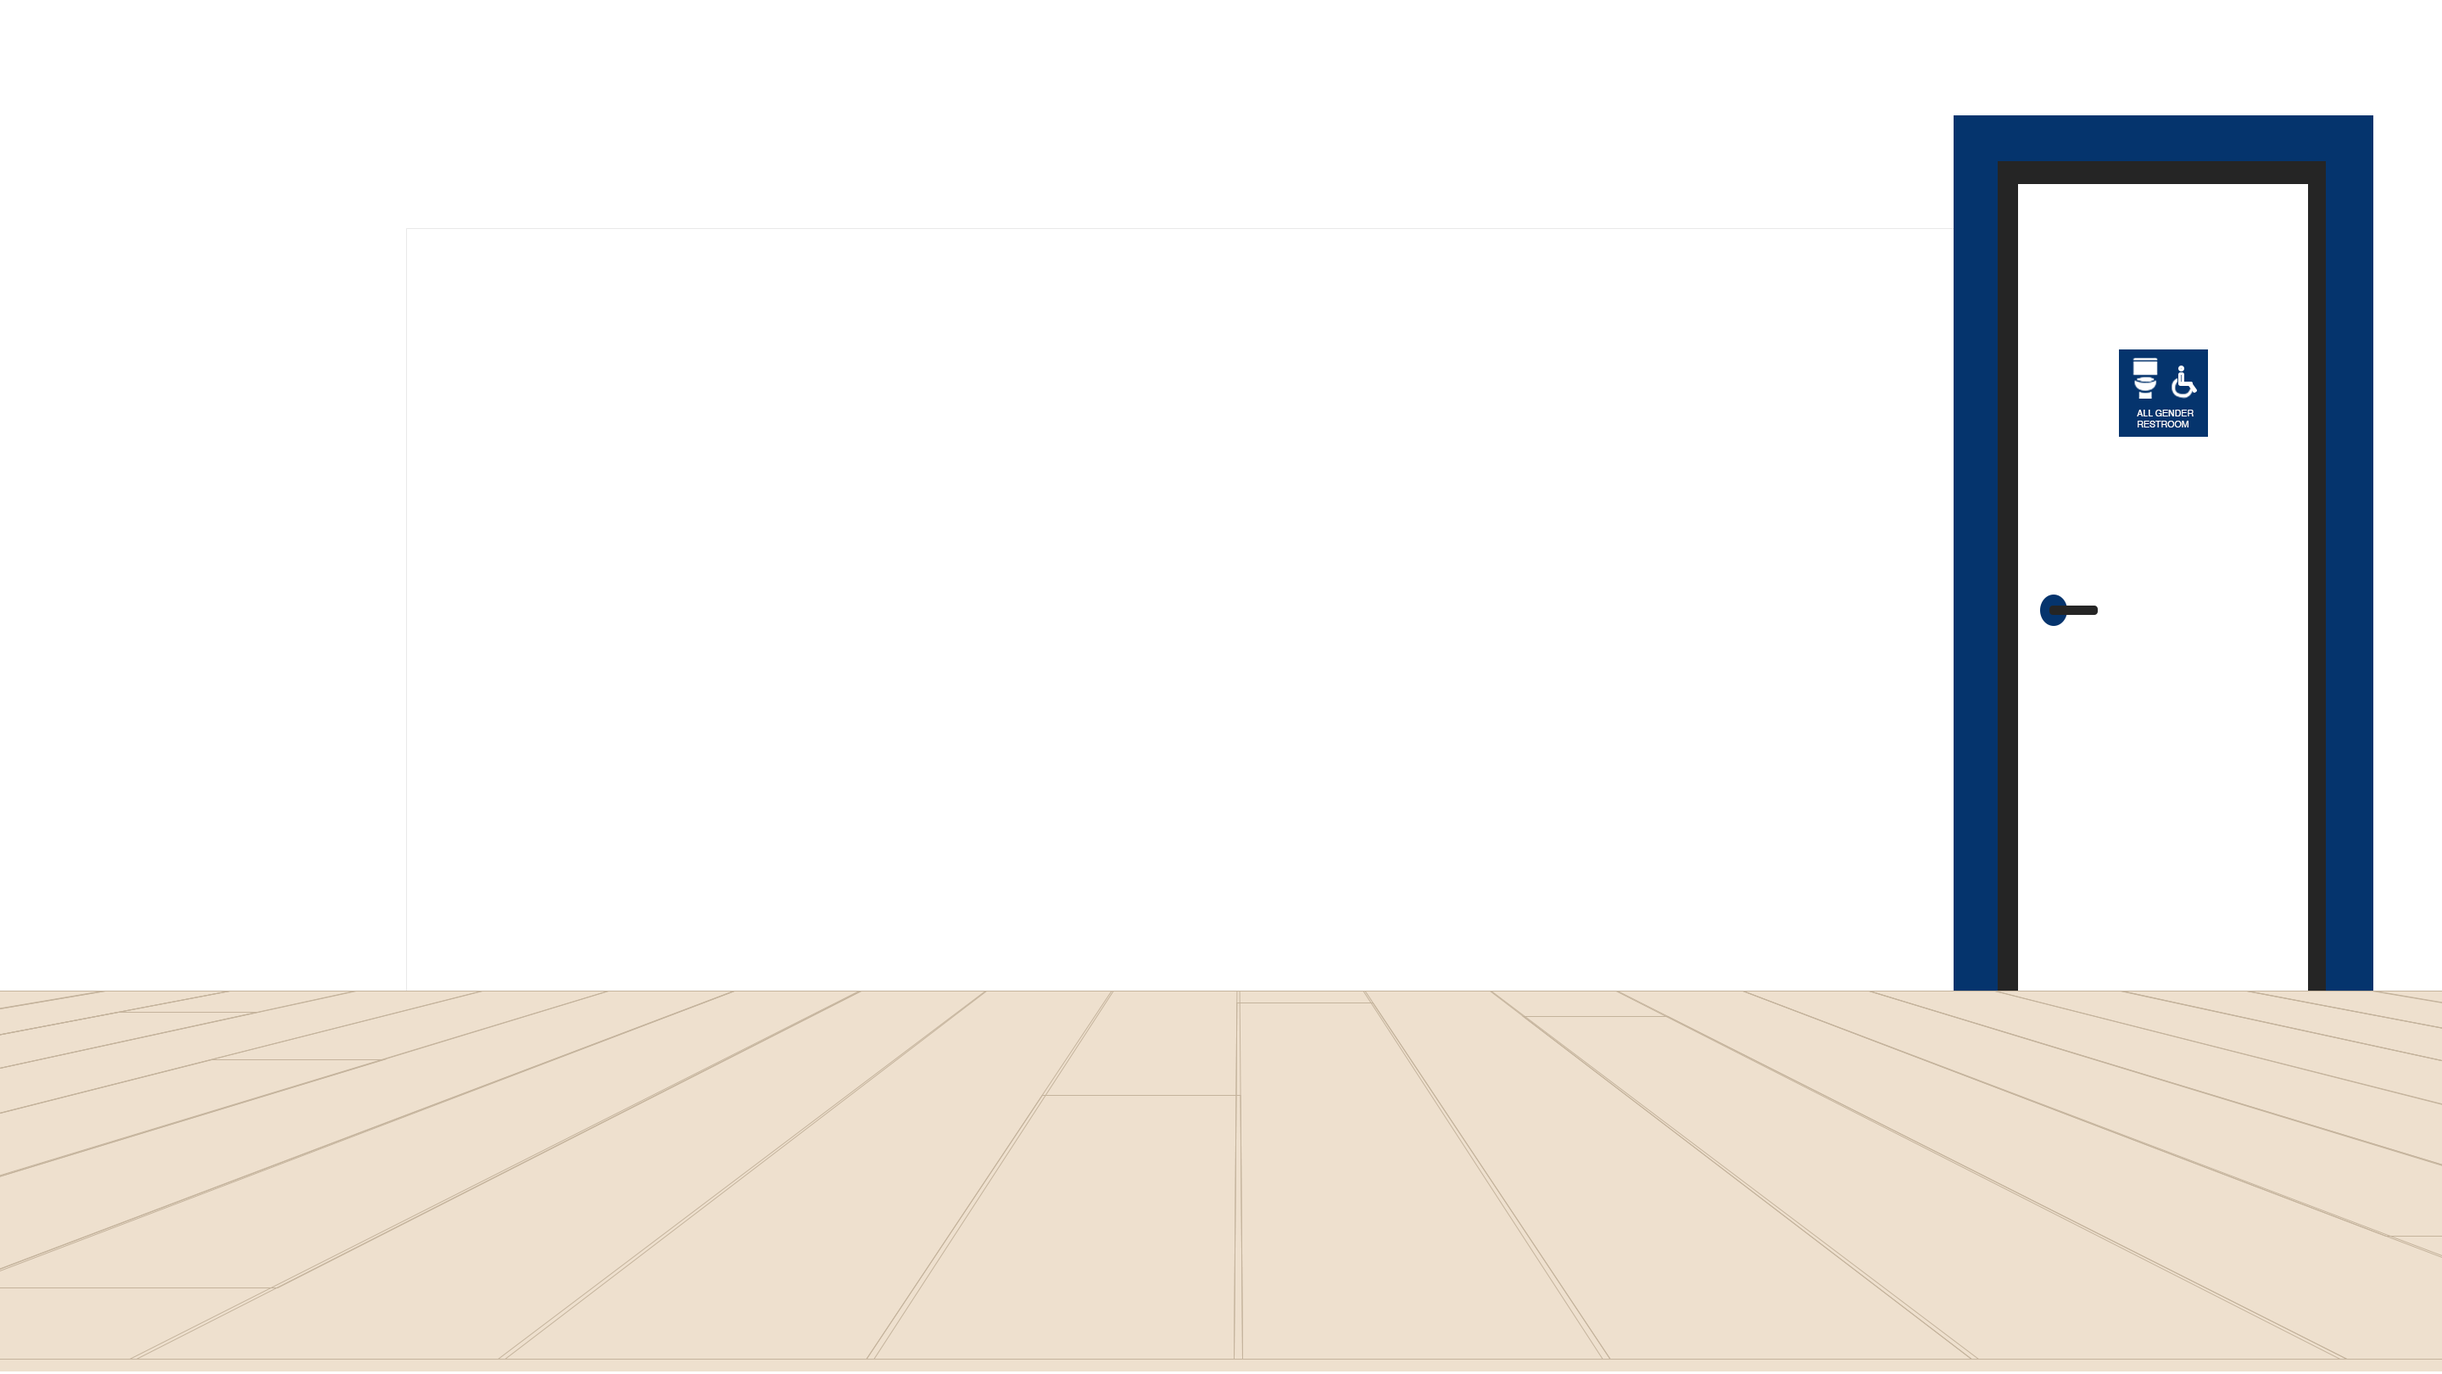
<style>
.page{position:relative;width:2442px;height:1374px;background:#ffffff}
.page>*{position:absolute;margin:0}
.t1{font:9px "Helvetica";color:#ffffff}
</style>
<div class="page">
<p class="t1" style="left:2137px;top:410px;width:57px;height:17px">ALL GENDER RESTROOM</p>
</div>
